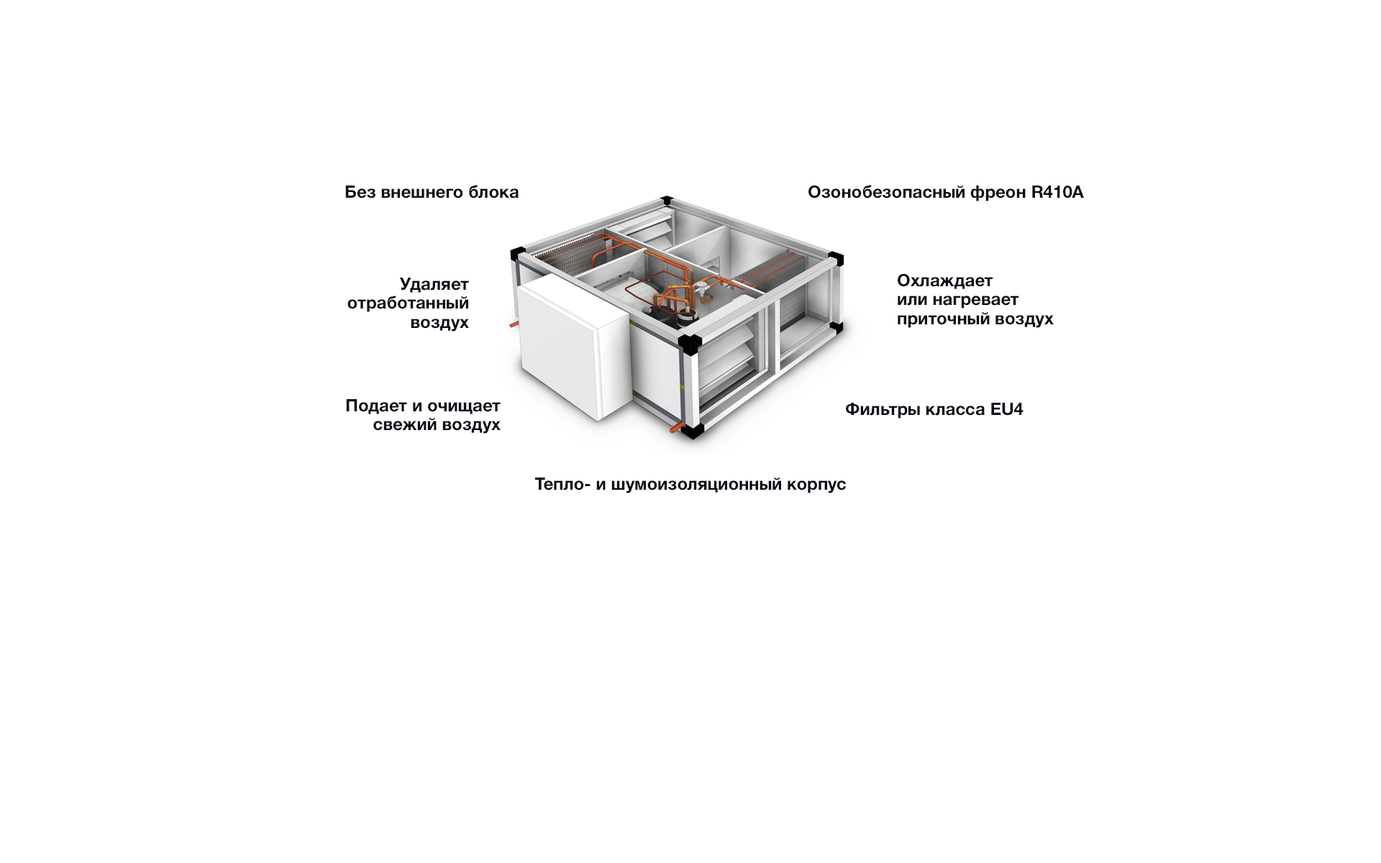
<style>
.page{position:relative;width:1381px;height:863px;background:#ffffff}
.page>*{position:absolute;margin:0}
.t1{font:17.3px "HelveticaNeueCyr-Bold";color:#0c0b17}
.t2{font:17.3px/19.2px "HelveticaNeueCyr-Bold";color:#0c0b17}
</style>
<div class="page">
<p class="t1" style="left:345px;top:185px;width:174px;height:14px">Без внешнего блока</p>
<p class="t1" style="left:809px;top:185px;width:275px;height:16px">Озонобезопасный фреон R410А</p>
<p class="t2" style="left:347px;top:278px;width:122px;height:54px;text-align:right">Удаляет<br>отработанный<br>воздух</p>
<p class="t2" style="left:898px;top:273px;width:156px;height:55px">Охлаждает <br>или нагревает <br>приточный воздух</p>
<p class="t2" style="left:346px;top:399px;width:155px;height:35px;text-align:right">Подает и очищает<br>свежий воздух</p>
<p class="t1" style="left:846px;top:403px;width:178px;height:16px">Фильтры класса EU4</p>
<p class="t1" style="left:535px;top:478px;width:311px;height:16px">Тепло- и шумоизоляционный корпус</p>
</div>
